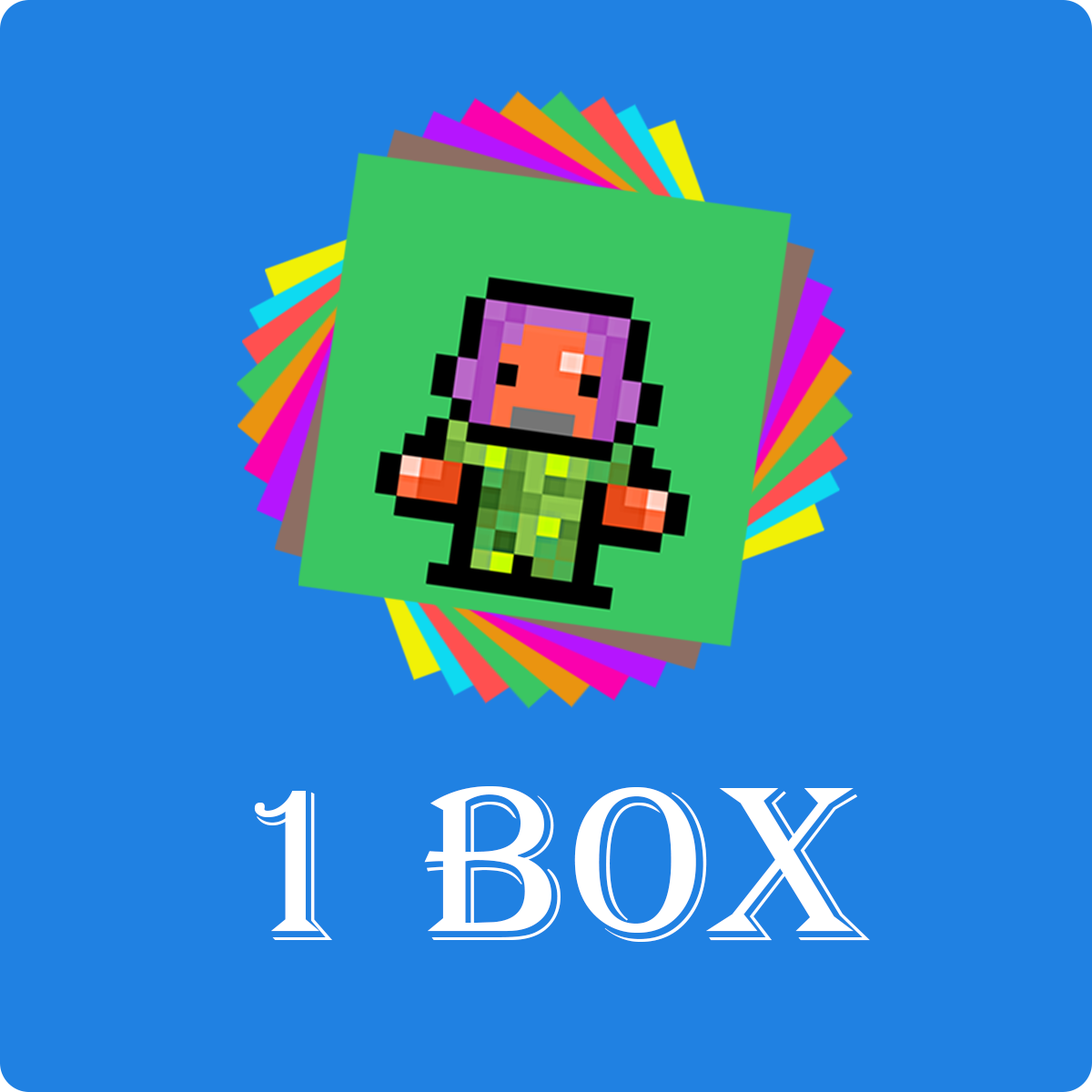
<style>
.page{position:relative;width:1092px;height:1092px;background:#2081e2}
.page>*{position:absolute;margin:0}
.t1{font:227.5px "Algerian";color:#ffffff}
</style>
<div class="page">
<p class="t1" style="left:254px;top:786px;width:616px;height:156px">1 BOX</p>
</div>
